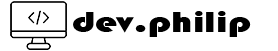
<style>
.page{position:relative;width:278px;height:51px;background:#ffffff}
.page>*{position:absolute;margin:0}
.t1{font:30.5px "Bauhaus93";color:#000000;scale:1.32 1}
</style>
<div class="page">
<p class="t1" style="left:73px;top:11px;width:178px;height:26px">dev.philip</p>
</div>
